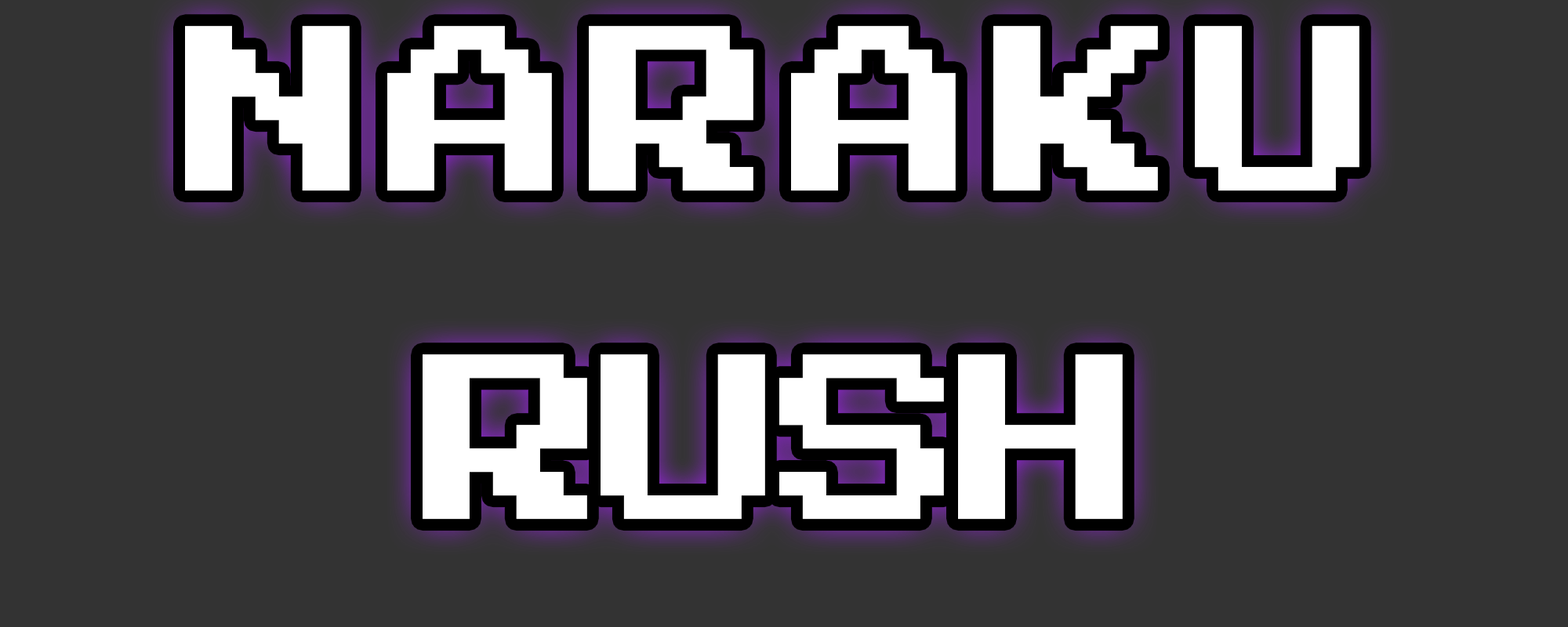
<style>
.page{position:relative;width:1568px;height:627px;background:#333333}
.page>*{position:absolute;margin:0}
.t1{font:187.9px "PressStart2P-Regular";letter-spacing:0.075em;color:#ffffff}
.t2{font:187.9px "PressStart2P-Regular";letter-spacing:-0.05em;color:#ffffff}
</style>
<div class="page">
<p class="t1" style="left:185px;top:26px;width:1174px;height:494px;text-align:center">NARAKU<br><span class="t2">RUSH</span></p>
</div>
